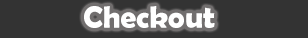
<style>
.page{position:relative;width:308px;height:38px;background:#333333}
.page>*{position:absolute;margin:0}
.t1{font:31px "BerlinSansFBDemi-Bold";color:#ffffff}
</style>
<div class="page">
<p class="t1" style="left:84px;top:6px;width:131px;height:22px">Checkout</p>
</div>
